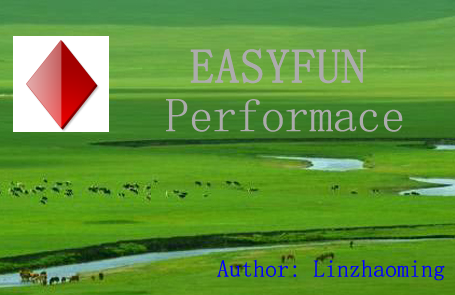
<style>
.page{position:relative;width:455px;height:295px}
.page>*{position:absolute;margin:0}
.t1{font:48px "SimSun";color:#acacac;font-weight:bold}
.t2{font:48px "SimSun";color:#acacac}
.t3{font:24px "SimSun";color:#0000ff}
</style>
<div class="page">
<p class="t1" style="left:190px;top:48px;width:176px;height:36px">EASYFUN</p>
<p class="t2" style="left:166px;top:99px;width:237px;height:33px">Performace</p>
<p class="t3" style="left:217px;top:259px;width:228px;height:22px">Author: Linzhaoming</p>
</div>
